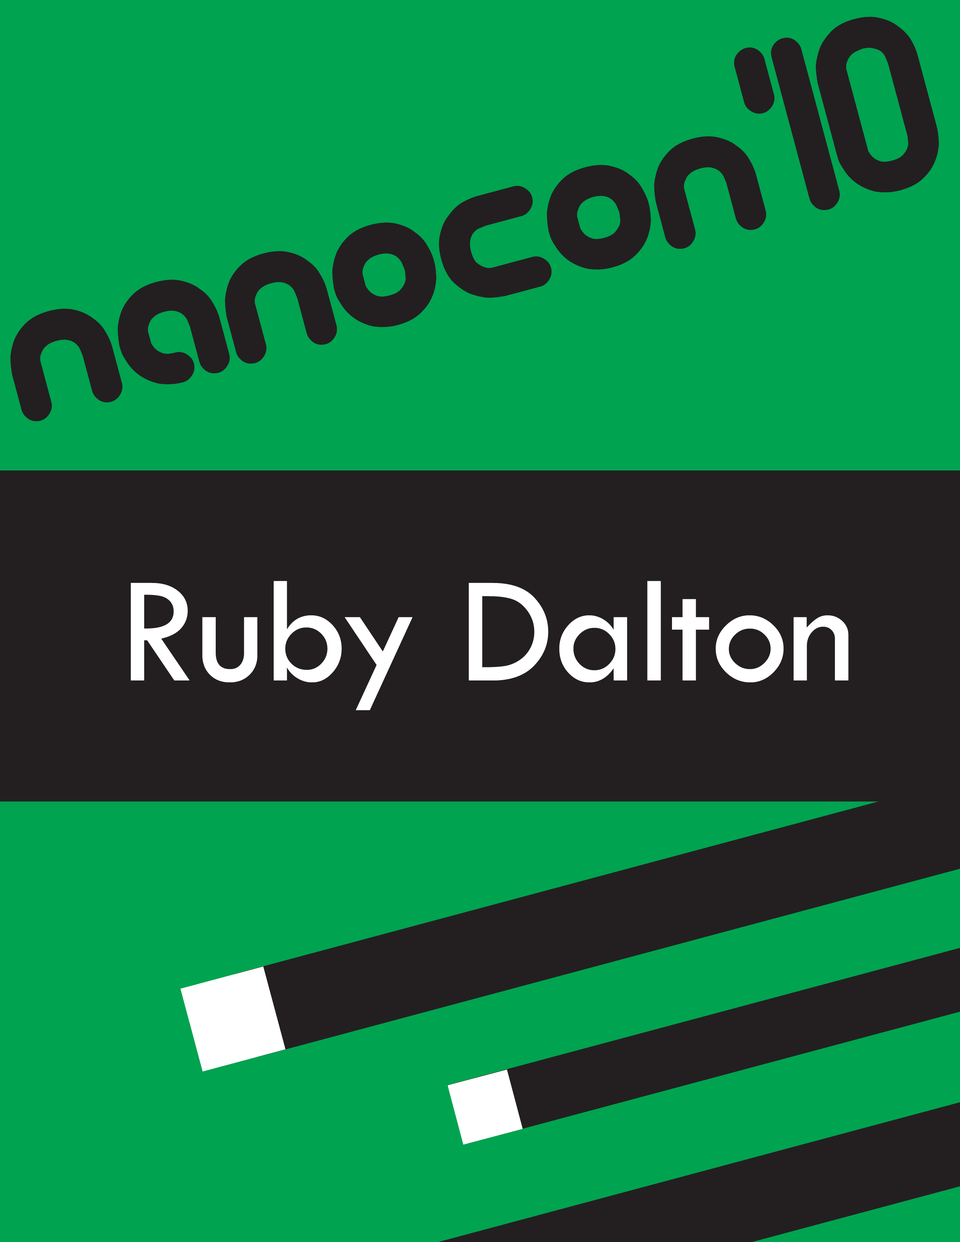
<style>
.page{position:relative;width:960px;height:1242px;background:#00a350}
.page>*{position:absolute;margin:0}
.t1{font:248.5px "technooverloadBRK";letter-spacing:-0.01em;color:#231f20}
.t2{font:156.8px "TwCenMT-Regular";letter-spacing:-0.01em;color:#ffffff}
</style>
<div class="page">
<p class="t1" style="left:10px;top:17px;width:929px;height:404px;rotate:-15deg">nanocon'10</p>
<p class="t1" style="left:10px;top:17px;width:929px;height:404px;rotate:-15deg">nanocon'10</p>
<p class="t2" style="left:131px;top:581px;width:717px;height:129px">Ruby Dalton</p>
</div>
